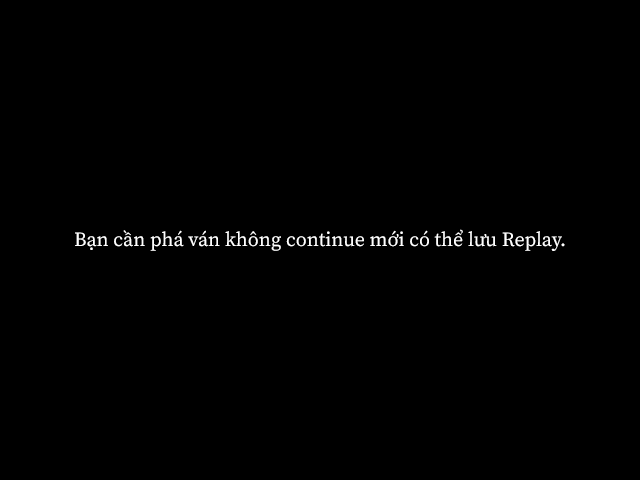
<style>
.page{position:relative;width:640px;height:480px;background:#000000}
.page>*{position:absolute;margin:0}
.t1{font:20px "SourceSerifRoman-Regular";color:#ffffff}
</style>
<div class="page">
<p class="t1" style="left:75px;top:229px;width:490px;height:22px">Bạn cần phá ván không continue mới có thể lưu Replay.</p>
</div>
